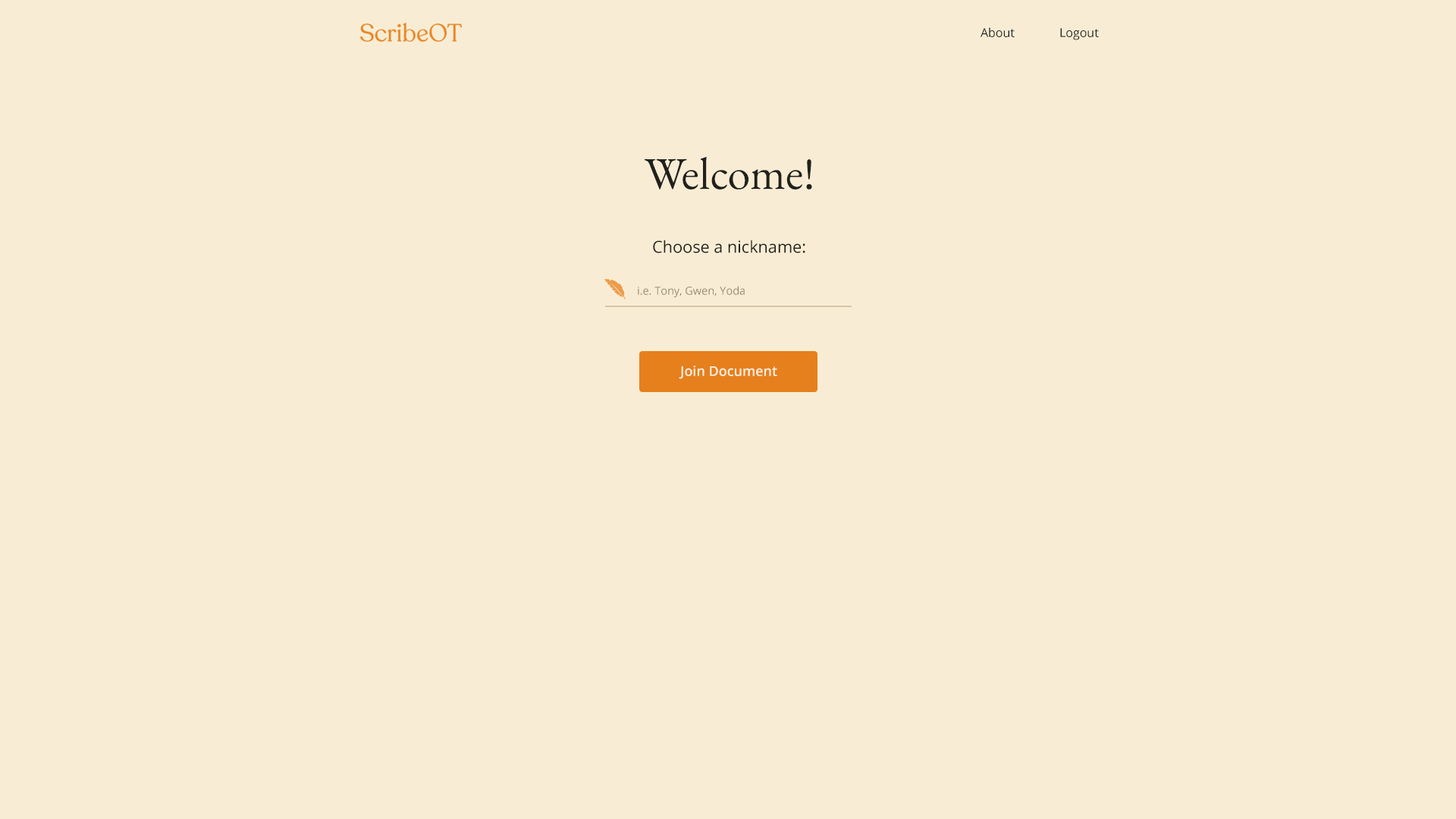
<style>
.page{position:relative;width:1456px;height:819px;background:#f8edd4}
.page>*{position:absolute;margin:0}
.t1{font:12.1px "OpenSans-Regular";color:#21201c}
.t2{font:45.5px "EBGaramond-Regular";color:#21201c}
.t3{font:16.4px "OpenSans-Regular";color:#21201c}
.t4{font:11px "OpenSans-Regular";color:#998774}
.t5{font:13.6px "OpenSans-SemiBold";color:#ffefdf}
</style>
<div class="page">
<p class="t1" style="left:981px;top:27px;width:34px;height:10px">About</p>
<p class="t1" style="left:1060px;top:28px;width:39px;height:12px">Logout</p>
<p class="t2" style="left:644px;top:156px;width:168px;height:34px">Welcome!</p>
<p class="t3" style="left:653px;top:240px;width:152px;height:13px">Choose a nickname:</p>
<p class="t4" style="left:638px;top:286px;width:107px;height:11px">i.e. Tony, Gwen, Yoda</p>
<p class="t5" style="left:679px;top:366px;width:98px;height:13px">Join Document</p>
</div>
